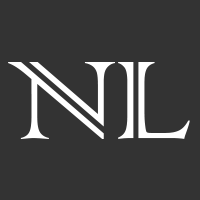
<style>
.page{position:relative;width:200px;height:200px;background:#333333}
.page>*{position:absolute;margin:0}
.t1{font:147px "ColonnaMT";letter-spacing:-0.04em;color:#ffffff}
</style>
<div class="page">
<p class="t1" style="left:8px;top:62px;width:182px;height:77px">NL</p>
</div>
